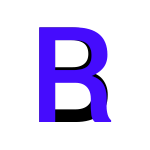
<style>
.page{position:relative;width:150px;height:150px;background:#ffffff}
.page>*{position:absolute;margin:0}
.t1{font:133.3px "Roboto-Medium";color:#450cfd}
</style>
<div class="page">
<p class="t1" style="left:39px;top:27px;width:69px;height:95px">B</p>
<p class="t1" style="left:39px;top:27px;width:73px;height:95px">R</p>
</div>
